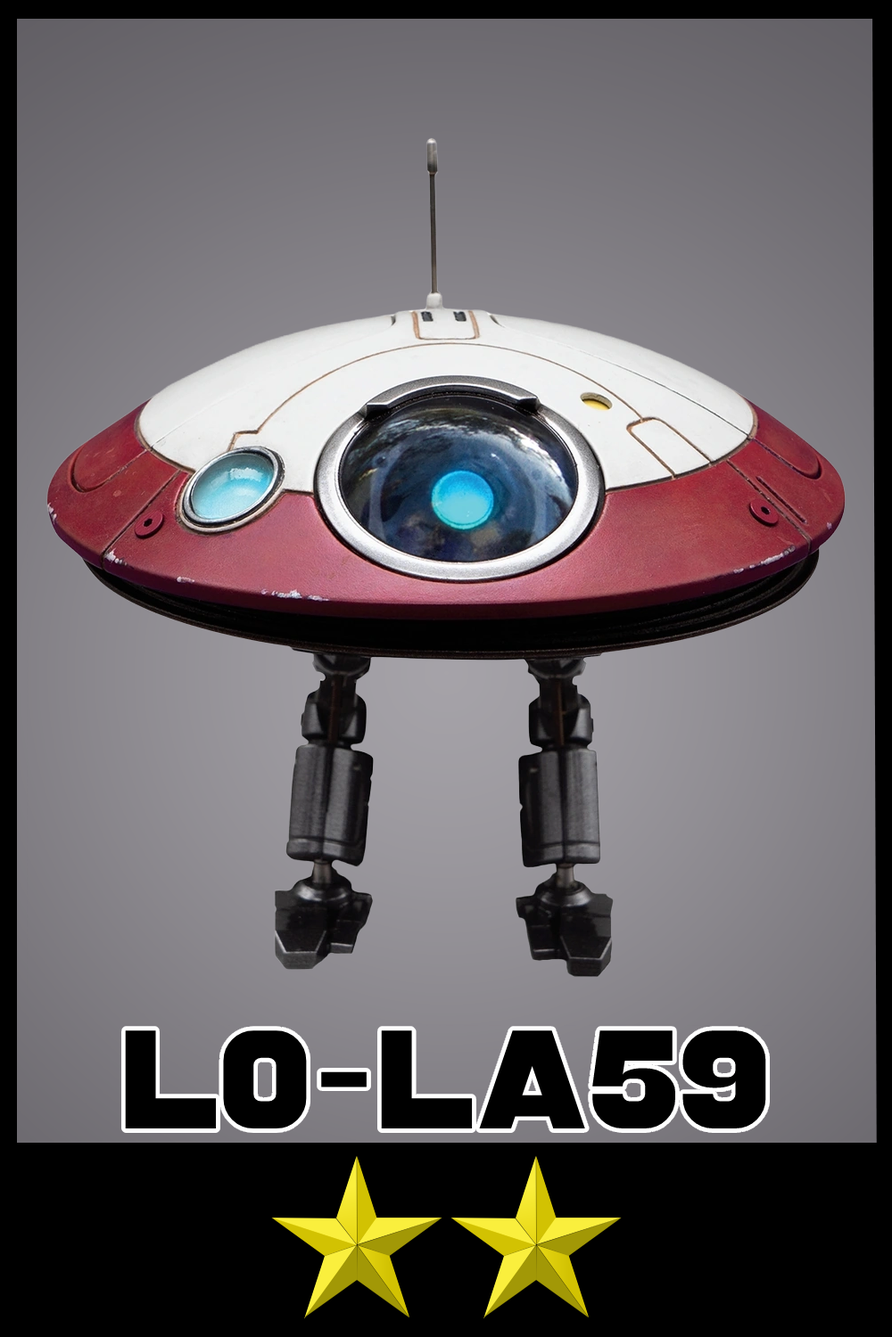
<style>
.page{position:relative;width:892px;height:1337px}
.page>*{position:absolute;margin:0}
.t1{font:150.5px "DistantGalaxy";color:#000000}
</style>
<div class="page">
<p class="t1" style="left:125px;top:1031px;width:641px;height:98px">l0-la59</p>
</div>
